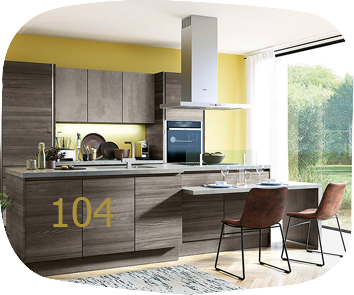
<style>
.page{position:relative;width:354px;height:295px}
.page>*{position:absolute;margin:0}
.t1{font:40px "Tahoma";color:#ab913b}
</style>
<div class="page">
<p class="t1" style="left:53px;top:197px;width:61px;height:30px">104</p>
</div>
